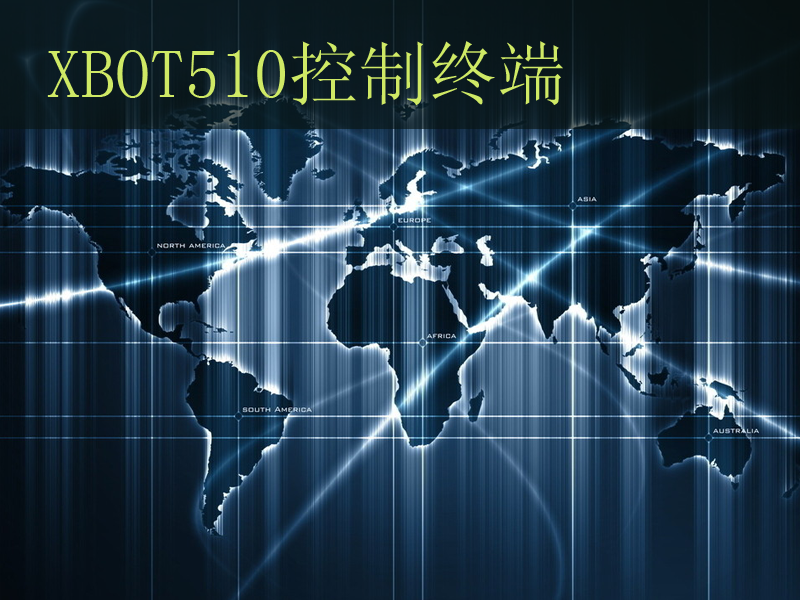
<style>
.page{position:relative;width:800px;height:600px}
.page>*{position:absolute;margin:0}
.t1{font:69.4px "SimSun";color:#cfe965}
</style>
<div class="page">
<p class="t1" style="left:47px;top:41px;width:516px;height:65px">XBOT510控制终端</p>
</div>
